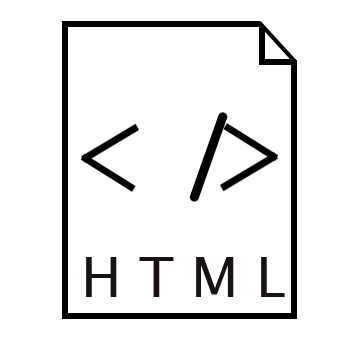
<style>
.page{position:relative;width:350px;height:350px;background:#ffffff}
.page>*{position:absolute;margin:0}
.t1{font:55px "LucidaSans";color:#181212}
</style>
<div class="page">
<p class="t1" style="left:86px;top:257px;width:199px;height:40px">H T M L</p>
</div>
